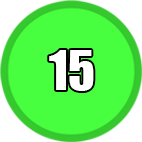
<style>
.page{position:relative;width:142px;height:142px;background:#47ff3e}
.page>*{position:absolute;margin:0}
.t1{font:50px "Impact";color:#ffffff}
</style>
<div class="page">
<p class="t1" style="left:49px;top:50px;width:45px;height:41px">15</p>
</div>
